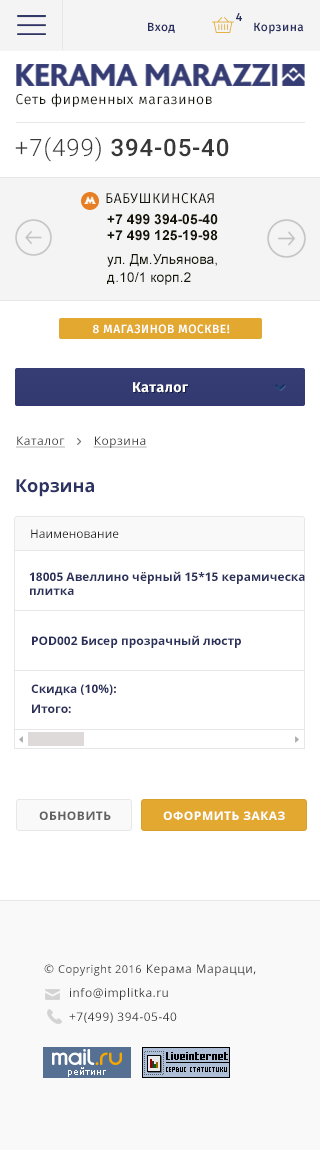
<style>
.page{position:relative;width:320px;height:1150px;background:#ffffff}
.page>*{position:absolute;margin:0}
.t1{font:12px "FiraSans-Medium";letter-spacing:0.04em;color:#292f60}
.t2{font:14px "FiraSans-Book";letter-spacing:0.04em;color:#151408}
.t3{font:24px "Roboto-Medium";letter-spacing:0.04em;color:#383838;text-transform:uppercase}
.t4{font:24px "Roboto-Light";letter-spacing:0.04em;color:#383838;text-transform:uppercase}
.t5{font:14px "FiraSans-Regular";letter-spacing:0.04em;color:#151408;text-transform:uppercase}
.t6{font:14px/10.8px "Arial-BoldMT";color:#151408;text-transform:uppercase}
.t7{font:14px/16px "Arial-BoldMT";color:#151408;text-transform:uppercase}
.t8{font:14px/24px "ArialMT";color:#151408}
.t9{font:14px/18px "ArialMT";color:#151408}
.t10{font:12px "FiraSans-Medium";letter-spacing:0.04em;color:#ffffff;text-transform:uppercase}
.t11{font:14px "FiraSans-Bold";letter-spacing:0.04em;color:#ffffff}
.t12{font:12px "OpenSans";letter-spacing:0.04em;color:#383838;text-decoration:underline}
.t13{font:18px "OpenSans-Bold";color:#2d3363}
.t14{font:12px "OpenSans";color:#212121}
.t15{font:12px/14px "OpenSans-Bold";color:#2a305b}
.t16{font:12px "OpenSans-Bold";color:#2a305b}
.t17{font:12px "OpenSans-Bold";letter-spacing:0.04em;color:#616161;text-transform:uppercase}
.t18{font:12px "OpenSans-Bold";letter-spacing:0.04em;color:#ffffff;text-transform:uppercase}
.t19{font:12px "OpenSans";letter-spacing:0.04em;color:#383838}
.t20{font:11px "OpenSans";letter-spacing:0.04em;color:#383838}
.t21{font:12px/24px "OpenSans";letter-spacing:0.04em;color:#383838}
</style>
<div class="page">
<p class="t1" style="left:236px;top:12px;width:6px;height:9px">4</p>
<p class="t1" style="left:148px;top:22px;width:27px;height:11px">Вход</p>
<p class="t1" style="left:254px;top:22px;width:50px;height:12px">Корзина</p>
<p class="t2" style="left:16px;top:93px;width:196px;height:14px">Сеть фирменных магазинов</p>
<p class="t3" style="left:15px;top:137px;width:214px;height:25px"><span class="t4">+7(499) </span>394-05-40</p>
<p class="t5" style="left:106px;top:193px;width:108px;height:11px">БАБУШКИНСКАЯ</p>
<p class="t6" style="left:107px;top:214px;width:111px;height:71px">+7 499 394-05-40 <br><span class="t7">+7 499 125-19-98<br></span><span class="t8">ул. Дм.Ульянова, <br></span><span class="t9">д.10/1 корп.2</span></p>
<p class="t10" style="left:93px;top:324px;width:137px;height:10px">8 магазинов Москве!</p>
<p class="t11" style="left:133px;top:382px;width:55px;height:11px">Каталог</p>
<p class="t12" style="left:16px;top:436px;width:131px;height:12px">Каталог        Корзина</p>
<p class="t13" style="left:16px;top:479px;width:78px;height:18px">Корзина</p>
<p class="t14" style="left:31px;top:529px;width:88px;height:9px">Наименование</p>
<p class="t15" style="left:29px;top:571px;width:276px;height:24px">18005 Авеллино чёрный 15*15 керамическа <br>плитка</p>
<p class="t16" style="left:32px;top:635px;width:209px;height:13px">POD002 Бисер прозрачный люстр</p>
<p class="t16" style="left:31px;top:684px;width:85px;height:12px">Скидка (10%):</p>
<p class="t16" style="left:32px;top:704px;width:39px;height:9px">Итого:</p>
<p class="t17" style="left:39px;top:811px;width:72px;height:9px">обновить</p>
<p class="t18" style="left:163px;top:811px;width:122px;height:9px">оформить заказ</p>
<p class="t19" style="left:44px;top:964px;width:212px;height:12px">© <span class="t20">Copyright 2016</span> Керама Марацци,</p>
<p class="t21" style="left:69px;top:988px;width:108px;height:35px">info@implitka.ru<br>+7(499) 394-05-40</p>
</div>
